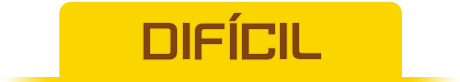
<style>
.page{position:relative;width:460px;height:82px;background:#fbd500}
.page>*{position:absolute;margin:0}
.t1{font:41.3px "KafuTechnoStd-HV";letter-spacing:0.013em;color:#804412}
</style>
<div class="page">
<p class="t1" style="left:143px;top:13px;width:178px;height:47px">DIFÍCIL</p>
</div>
